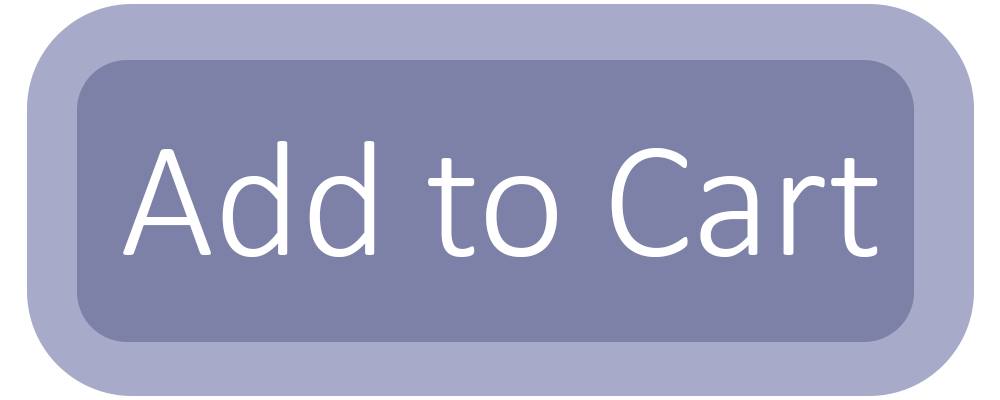
<style>
.page{position:relative;width:1000px;height:400px;background:#7e81a7}
.page>*{position:absolute;margin:0}
.t1{font:166.7px "Calibri-Light";color:#ffffff}
</style>
<div class="page">
<p class="t1" style="left:123px;top:141px;width:755px;height:116px">Add to Cart</p>
</div>
